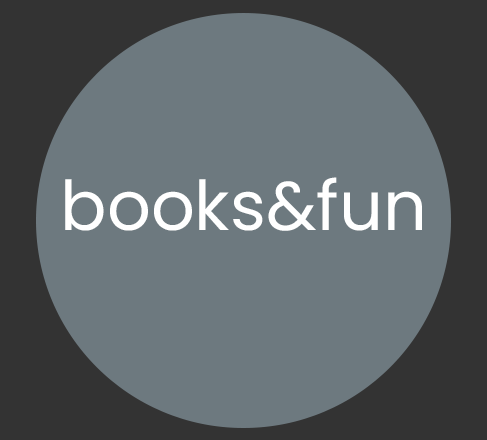
<style>
.page{position:relative;width:487px;height:440px;background:#6d797f}
.page>*{position:absolute;margin:0}
.t1{font:68.6px "Poppins-Regular";color:#ffffff}
</style>
<div class="page">
<p class="t1" style="left:65px;top:177px;width:357px;height:54px">books&amp;fun</p>
</div>
